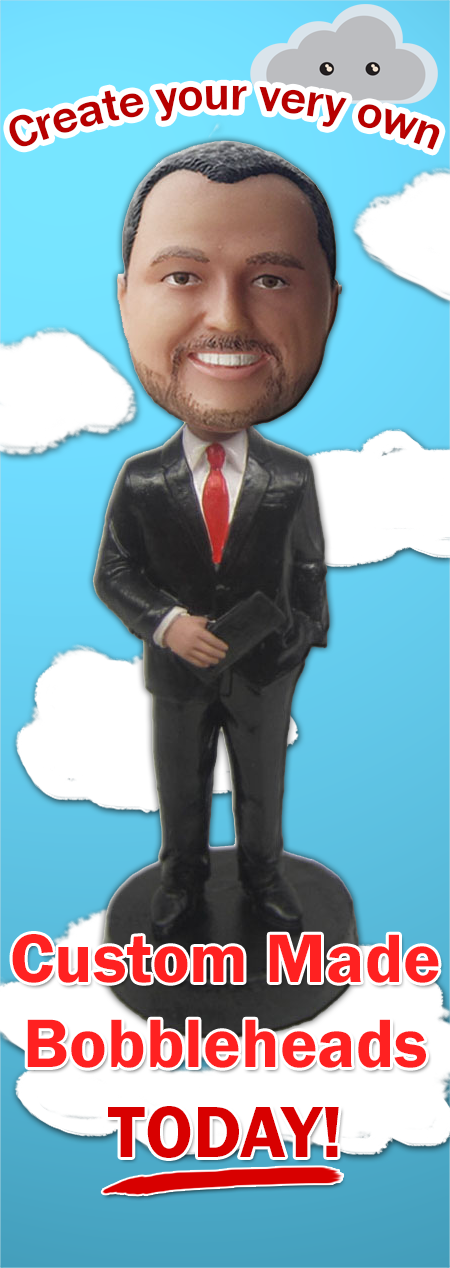
<style>
.page{position:relative;width:450px;height:1268px}
.page>*{position:absolute;margin:0}
.t1{font:45.8px "FranklinGothic-Medium";color:#b70000}
.t2{font:70.8px "FranklinGothic-Demi";color:#ff2121}
.t3{font:75px "FranklinGothic-Demi";color:#d80000}
</style>
<div class="page">
<p class="t1" style="left:9px;top:85px;width:431px;height:65px">Create your very own</p>
<p class="t2" style="left:12px;top:934px;width:427px;height:224px;text-align:center">Custom Made Bobbleheads <span class="t3">TODAY!</span></p>
</div>
